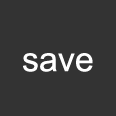
<style>
.page{position:relative;width:116px;height:116px;background:#333333}
.page>*{position:absolute;margin:0}
.t1{font:34px "ArialMT";color:#ffffff}
</style>
<div class="page">
<p class="t1" style="left:23px;top:53px;width:70px;height:19px">save</p>
</div>
